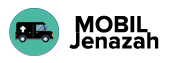
<style>
.page{position:relative;width:180px;height:63px;background:#ffffff}
.page>*{position:absolute;margin:0}
.t1{font:24px "ProximaNova-Bold";color:#000000}
</style>
<div class="page">
<p class="t1" style="left:75px;top:15px;width:73px;height:18px">MOBIL</p>
<p class="t1" style="left:69px;top:32px;width:90px;height:17px">Jenazah</p>
</div>
